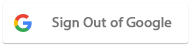
<style>
.page{position:relative;width:191px;height:46px;background:#ffffff}
.page>*{position:absolute;margin:0}
.t1{font:14.2px "MyriadPro-Regular";color:#757575;font-weight:bold}
</style>
<div class="page">
<p class="t1" style="left:52px;top:17px;width:120px;height:14px">Sign Out of Google</p>
</div>
